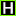
<style>
.page{position:relative;width:16px;height:16px;background:#000000}
.page>*{position:absolute;margin:0}
.t1{font:15.9px "Oslo-Bold";letter-spacing:0.01em;color:#ffffff;scale:1.06 1}
</style>
<div class="page">
<p class="t1" style="left:3px;top:2px;width:10px;height:12px">H</p>
</div>
